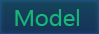
<style>
.page{position:relative;width:99px;height:34px}
.page>*{position:absolute;margin:0}
.t1{font:23.3px "SegoeUISymbol";color:#19b579}
</style>
<div class="page">
<p class="t1" style="left:15px;top:9px;width:64px;height:17px">Model</p>
</div>
